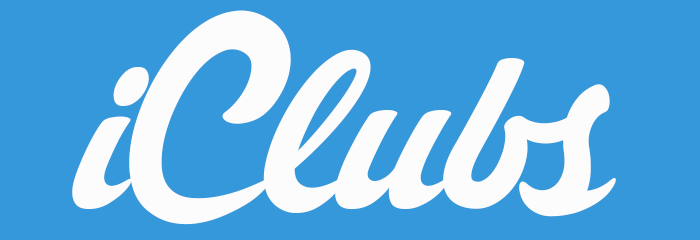
<style>
.page{position:relative;width:700px;height:240px;background:#3498db}
.page>*{position:absolute;margin:0}
.t1{font:300px "MastocPersonalUseOnly";color:#fcfcfc}
</style>
<div class="page">
<p class="t1" style="left:72px;top:10px;width:544px;height:215px">iClubs</p>
</div>
